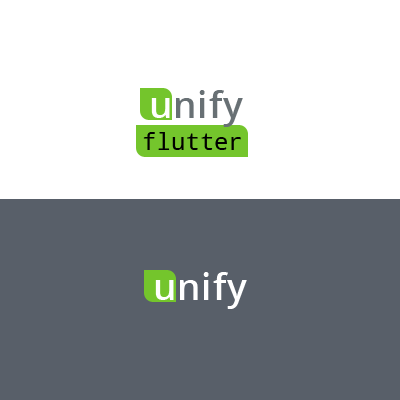
<style>
.page{position:relative;width:400px;height:400px;background:#585f69}
.page>*{position:absolute;margin:0}
.t1{font:37px "OpenSans-Semibold";letter-spacing:0.02em;color:#687074}
.t2{font:37px "OpenSans-Semibold";letter-spacing:0.02em;color:#ffffff}
.t3{font:24px "DroidSansMonoCustom";color:#000000}
</style>
<div class="page">
<p class="t1" style="left:151px;top:90px;width:92px;height:37px"><span class="t2">u</span>nify</p>
<p class="t3" style="left:143px;top:132px;width:98px;height:18px">flutter</p>
<p class="t2" style="left:155px;top:272px;width:92px;height:37px">unify</p>
</div>
